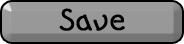
<style>
.page{position:relative;width:184px;height:44px;background:#989898}
.page>*{position:absolute;margin:0}
.t1{font:36px "PykesPeakZero";color:#000000;font-weight:bold}
.t2{font:30px "Tahoma";color:#ffffff;font-weight:bold}
</style>
<div class="page">
<p class="t1" style="left:59px;top:8px;width:66px;height:23px"><span class="t2"><br></span>Save</p>
</div>
